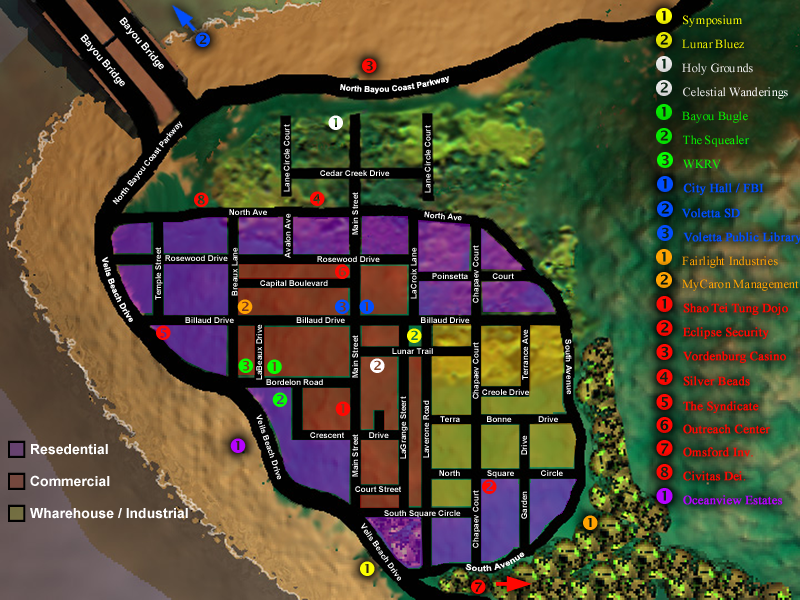
<style>
.page{position:relative;width:800px;height:600px}
.page>*{position:absolute;margin:0}
.t1{font:10px "Arial-BoldMT";color:#ffffff}
.t2{font:12.5px "TimesNewRomanPSMT";color:#fbfe01}
.t3{font:22.2px "Wingdings-Regular";color:#fbfe01}
.t4{font:12.5px "TimesNewRomanPSMT";color:#e1e201}
.t5{font:22.2px "Wingdings-Regular";color:#e1e201}
.t6{font:12.5px "TimesNewRomanPSMT";color:#e3e3e3}
.t7{font:22.2px "Wingdings-Regular";color:#e3e3e3}
.t8{font:8.1px "Arial-BoldMT";color:#ffffff}
.t9{font:12.5px "TimesNewRomanPSMT";color:#05e201}
.t10{font:22.2px "Wingdings-Regular";color:#05e201}
.t11{font:8px "Arial-BoldMT";color:#ffffff}
.t12{font:12.5px "TimesNewRomanPSMT";color:#05e501}
.t13{font:22.2px "Wingdings-Regular";color:#05e501}
.t14{font:12.5px "TimesNewRomanPSMT";color:#06fe01}
.t15{font:22.2px "Wingdings-Regular";color:#06fe01}
.t16{font:12.5px "TimesNewRomanPSMT";color:#014efe;font-weight:bold}
.t17{font:22.2px "Wingdings-Regular";color:#014efe}
.t18{font:12.5px "TimesNewRomanPSMT";color:#ffa302}
.t19{font:22.2px "Wingdings-Regular";color:#ffa302}
.t20{font:12.5px "TimesNewRomanPSMT";color:#ff0802;font-weight:bold}
.t21{font:22.2px "Wingdings-Regular";color:#ff0802}
.t22{font:14px "Arial-BoldMT";color:#ffffff}
.t23{font:12.5px "TimesNewRomanPSMT";color:#b502ff;font-weight:bold}
.t24{font:22.2px "Wingdings-Regular";color:#b502ff}
</style>
<div class="page">
<p class="t1" style="left:119px;top:17px;width:45px;height:53px;rotate:50deg">Bayou Bridge</p>
<p class="t2" style="left:656px;top:8px;width:86px;height:19px"><span class="t3">  </span>Symposium</p>
<p class="t1" style="left:80px;top:34px;width:45px;height:53px;rotate:50deg">Bayou Bridge</p>
<p class="t4" style="left:656px;top:32px;width:88px;height:17px"><span class="t5">  </span>Lunar Bluez</p>
<p class="t6" style="left:656px;top:56px;width:97px;height:19px"><span class="t7">  </span>Holy Grounds</p>
<p class="t8" style="left:340px;top:76px;width:109px;height:18px;rotate:-5deg">North Bayou Coast Parkway</p>
<p class="t6" style="left:656px;top:80px;width:132px;height:19px"><span class="t7">  </span>Celestial Wanderings</p>
<p class="t9" style="left:656px;top:104px;width:92px;height:19px"><span class="t10">  </span>Bayou Bugle</p>
<p class="t11" style="left:112px;top:121px;width:71px;height:84px;rotate:-51deg">North Bayou Coast Parkway</p>
<p class="t11" style="left:283px;top:124px;width:7px;height:68px;rotate:-90deg">Lane Circle Court</p>
<p class="t11" style="left:424px;top:125px;width:7px;height:68px;rotate:-90deg">Lane Circle Court</p>
<p class="t12" style="left:656px;top:128px;width:93px;height:19px"><span class="t13">  </span>The Squealer</p>
<p class="t14" style="left:657px;top:152px;width:64px;height:17px"><span class="t15">  </span>WKRV</p>
<p class="t11" style="left:320px;top:170px;width:70px;height:6px">Cedar Creek Drive</p>
<p class="t16" style="left:657px;top:176px;width:107px;height:19px"><span class="t17">  </span>City Hall / FBI</p>
<p class="t11" style="left:352px;top:192px;width:6px;height:285px;rotate:-90deg">Main Street                         Main Street                                             Main Street</p>
<p class="t11" style="left:229px;top:209px;width:38px;height:6px">North Ave</p>
<p class="t16" style="left:657px;top:201px;width:83px;height:17px"><span class="t17">  </span>Voletta SD</p>
<p class="t11" style="left:284px;top:213px;width:7px;height:45px;rotate:-90deg">Avalon Ave</p>
<p class="t11" style="left:424px;top:211px;width:38px;height:10px;rotate:6deg">North Ave</p>
<p class="t16" style="left:657px;top:225px;width:145px;height:19px"><span class="t17">  </span>Voletta Public Library</p>
<p class="t11" style="left:472px;top:245px;width:8px;height:303px;rotate:-90deg">Chapaev Court                                         Chapaev Court                  Chapaev Court</p>
<p class="t8" style="left:102px;top:256px;width:31px;height:66px;rotate:66deg">Veils Beach Drive</p>
<p class="t11" style="left:155px;top:247px;width:8px;height:53px;rotate:-90deg">Temple Street</p>
<p class="t11" style="left:165px;top:255px;width:63px;height:6px">Rosewood Drive</p>
<p class="t11" style="left:231px;top:247px;width:7px;height:49px;rotate:-90deg">Breaux Lane</p>
<p class="t11" style="left:317px;top:256px;width:63px;height:6px">Rosewood Drive</p>
<p class="t11" style="left:410px;top:247px;width:7px;height:52px;rotate:-90deg">LaCroix Lane</p>
<p class="t18" style="left:656px;top:249px;width:122px;height:19px"><span class="t19">  </span>Fairlight Industries</p>
<p class="t11" style="left:260px;top:280px;width:68px;height:8px">Capital Boulevard</p>
<p class="t11" style="left:432px;top:273px;width:82px;height:6px">Poinsetta           Court</p>
<p class="t18" style="left:656px;top:272px;width:143px;height:19px"><span class="t19">  </span>MyCaron Management</p>
<p class="t20" style="left:656px;top:296px;width:132px;height:19px"><span class="t21">  </span>Shao Tei Tung Dojo</p>
<p class="t11" style="left:185px;top:317px;width:285px;height:6px">Billaud Drive                            Billaud Drive                                  Billaud Drive</p>
<p class="t11" style="left:256px;top:324px;width:6px;height:56px;rotate:-90deg">LaBeaux Drive</p>
<p class="t11" style="left:522px;top:329px;width:6px;height:51px;rotate:-90deg">Terrance Ave</p>
<p class="t20" style="left:656px;top:320px;width:113px;height:19px"><span class="t21">  </span>Eclipse Security</p>
<p class="t8" style="left:565px;top:339px;width:7px;height:56px;rotate:88deg">South Avenue</p>
<p class="t11" style="left:392px;top:348px;width:41px;height:6px">Lunar Trail</p>
<p class="t20" style="left:656px;top:344px;width:130px;height:19px"><span class="t21">  </span>Vordenburg Casino</p>
<p class="t20" style="left:656px;top:369px;width:94px;height:17px"><span class="t21">  </span>Silver Beads</p>
<p class="t11" style="left:266px;top:379px;width:57px;height:6px">Bordelon Road</p>
<p class="t11" style="left:482px;top:389px;width:47px;height:6px">Creole Drive</p>
<p class="t11" style="left:400px;top:396px;width:8px;height:63px;rotate:-90deg">LaGrange Steert</p>
<p class="t11" style="left:423px;top:400px;width:6px;height:58px;rotate:-90deg">Laverone Road</p>
<p class="t20" style="left:656px;top:394px;width:103px;height:19px"><span class="t21">  </span>The Syndicate</p>
<p class="t8" style="left:256px;top:414px;width:25px;height:66px;rotate:71deg">Veils Beach Drive</p>
<p class="t11" style="left:440px;top:416px;width:118px;height:6px">Terra            Bonne            Drive</p>
<p class="t20" style="left:656px;top:417px;width:114px;height:17px"><span class="t21">  </span>Outreach Center</p>
<p class="t11" style="left:310px;top:432px;width:79px;height:6px">Crescent           Drive</p>
<p class="t11" style="left:521px;top:435px;width:6px;height:84px;rotate:-90deg">Garden                Drive</p>
<p class="t22" style="left:31px;top:444px;width:77px;height:11px">Resedential</p>
<p class="t20" style="left:656px;top:440px;width:97px;height:17px"><span class="t21">  </span>Omsford Inv.</p>
<p class="t11" style="left:439px;top:470px;width:124px;height:8px">North            Square            Circle</p>
<p class="t20" style="left:656px;top:464px;width:90px;height:17px"><span class="t21">  </span>Civitas Dei.</p>
<p class="t22" style="left:30px;top:475px;width:80px;height:12px">Commercial</p>
<p class="t11" style="left:355px;top:486px;width:46px;height:6px">Court Street</p>
<p class="t23" style="left:656px;top:488px;width:127px;height:17px"><span class="t24">  </span>Oceanview Estates</p>
<p class="t22" style="left:30px;top:508px;width:158px;height:11px">Wharehouse / Industrial</p>
<p class="t11" style="left:384px;top:510px;width:77px;height:8px">South Square Circle</p>
<p class="t8" style="left:361px;top:522px;width:40px;height:59px;rotate:55deg">Veils Beach Drive</p>
<p class="t8" style="left:465px;top:552px;width:60px;height:20px;rotate:-14deg">South Avenue</p>
</div>
